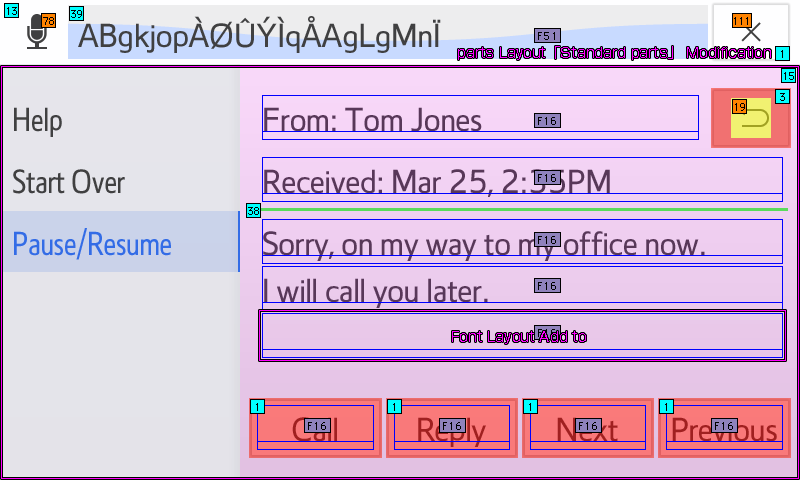
<style>
.page{position:relative;width:800px;height:480px}
.page>*{position:absolute;margin:0}
.t1{font:30px "Tfont1502_T1S";color:#404041}
.t2{font:14px "ShinGoPro-Regular";color:#ff00ff}
.t3{font:30px "Tfont1502_T2S";color:#404041}
.t4{font:30px/62px "Tfont1502_T1S";color:#583859}
.t5{font:30px "Tfont1502_T2S";color:#336ce6}
.t6{font:30px/47px "Tfont1502_T1S";color:#583859}
.t7{font:30px "Tfont1502_T1S";color:#a02020}
</style>
<div class="page">
<p class="t1" style="left:78px;top:16px;width:363px;height:37px">ABgkjopÀØÛÝÌqÅAgLgMnÏ</p>
<p class="t2" style="left:458px;top:46px;width:313px;height:14px">parts Layout「Standard parts」 Modification</p>
<p class="t3" style="left:14px;top:107px;width:48px;height:30px">Help</p>
<p class="t4" style="left:264px;top:107px;width:346px;height:90px">From: Tom Jones<br>Received: Mar 25, 2:35PM</p>
<p class="t3" style="left:13px;top:169px;width:112px;height:25px">Start Over</p>
<p class="t5" style="left:14px;top:228px;width:157px;height:32px">Pause/Resume</p>
<p class="t6" style="left:263px;top:231px;width:442px;height:77px">Sorry, on my way to my office now.<br>I will call you later.</p>
<p class="t2" style="left:452px;top:331px;width:134px;height:13px">Font Layout Add to</p>
<p class="t7" style="left:292px;top:417px;width:45px;height:25px">Call</p>
<p class="t7" style="left:418px;top:417px;width:68px;height:30px">Reply</p>
<p class="t7" style="left:557px;top:417px;width:61px;height:25px">Next</p>
<p class="t7" style="left:672px;top:417px;width:105px;height:25px">Previous</p>
</div>
